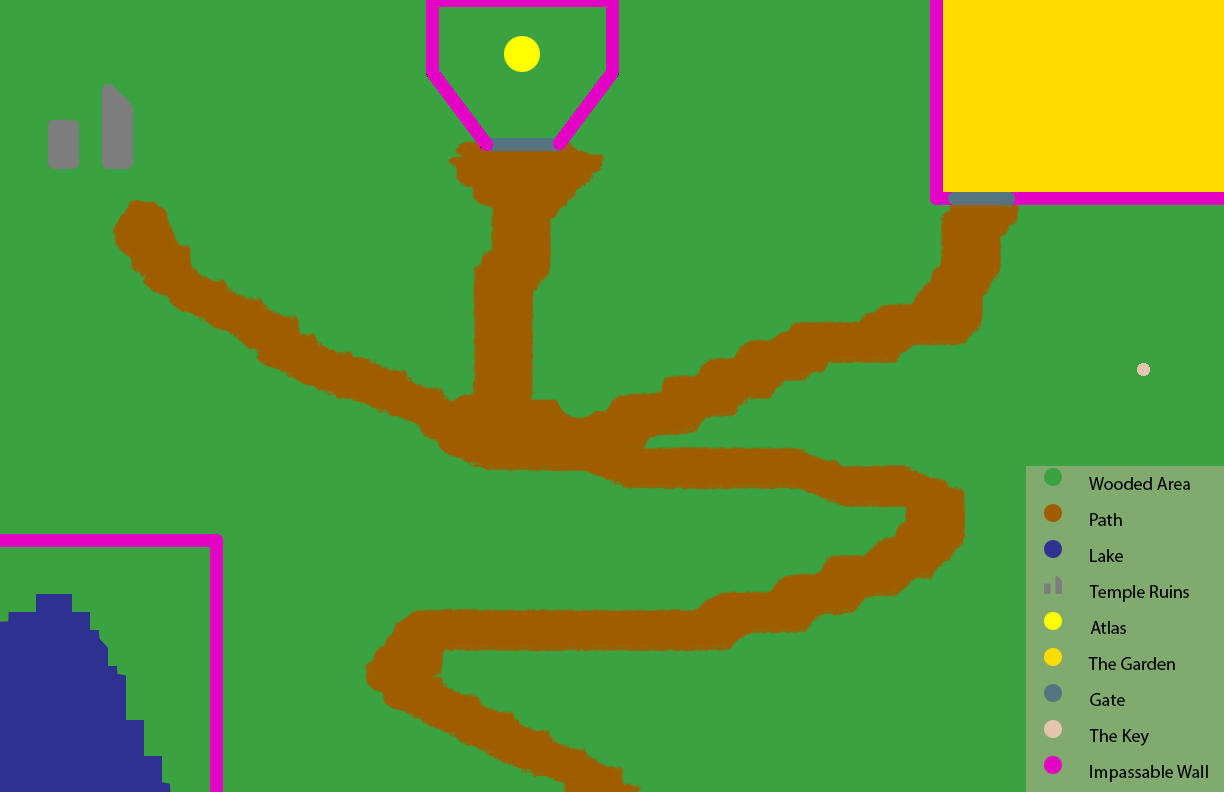
<style>
.page{position:relative;width:1224px;height:792px;background:#3ba241}
.page>*{position:absolute;margin:0}
.t1{font:18px "MyriadPro-Regular";color:#000000}
</style>
<div class="page">
<p class="t1" style="left:1089px;top:477px;width:101px;height:13px">Wooded Area</p>
<p class="t1" style="left:1090px;top:513px;width:32px;height:13px">Path</p>
<p class="t1" style="left:1090px;top:549px;width:33px;height:13px">Lake</p>
<p class="t1" style="left:1089px;top:585px;width:100px;height:17px">Temple Ruins</p>
<p class="t1" style="left:1090px;top:621px;width:36px;height:13px">Atlas</p>
<p class="t1" style="left:1088px;top:657px;width:87px;height:13px">The Garden</p>
<p class="t1" style="left:1090px;top:693px;width:35px;height:13px">Gate</p>
<p class="t1" style="left:1089px;top:729px;width:60px;height:17px">The Key</p>
<p class="t1" style="left:1090px;top:765px;width:118px;height:17px">Impassable Wall</p>
</div>
